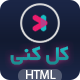
<style>
.page{position:relative;width:80px;height:80px}
.page>*{position:absolute;margin:0}
.t1{font:25px "WyekanBold";color:#1a9a9f}
.t2{font:12.5px "MyriadPro-Regular";color:#ffffff}
</style>
<div class="page">
<p class="t1" style="left:10px;top:46px;width:59px;height:19px">کل کنی</p>
<p class="t2" style="left:26px;top:70px;width:30px;height:9px">HTML</p>
</div>
